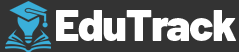
<style>
.page{position:relative;width:239px;height:52px;background:#333333}
.page>*{position:absolute;margin:0}
.t1{font:44.1px "Barlow-Black";letter-spacing:-0.03em;color:#ffffff}
</style>
<div class="page">
<p class="t1" style="left:56px;top:10px;width:180px;height:31px">EduTrack</p>
</div>
